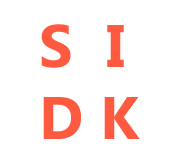
<style>
.page{position:relative;width:178px;height:164px;background:#ffffff}
.page>*{position:absolute;margin:0}
.t1{font:60px "MicrosoftPhagsPa-Bold";color:#fe5a3f}
</style>
<div class="page">
<p class="t1" style="left:41px;top:24px;width:99px;height:115px">S  I<br>D K</p>
</div>
